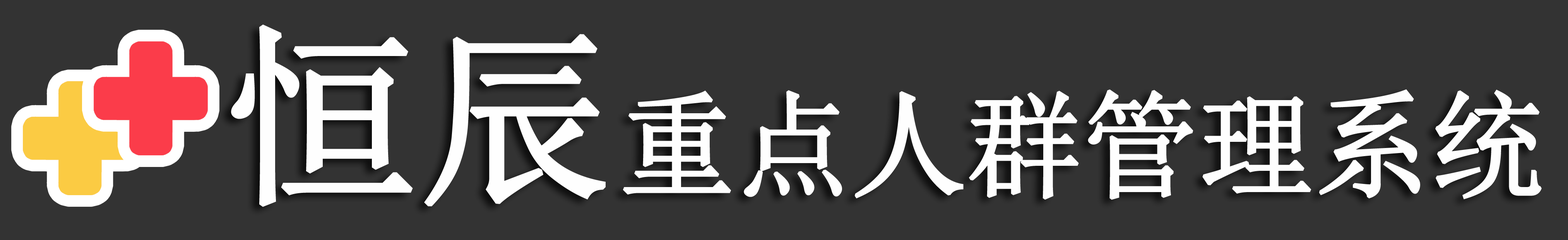
<style>
.page{position:relative;width:1568px;height:240px;background:#333333}
.page>*{position:absolute;margin:0}
.t1{font:193.5px "SimSun";letter-spacing:-0.03em;color:#fefefe;font-weight:bold}
.t2{font:116.1px "SimSun";letter-spacing:-0.03em;color:#fefefe;font-weight:bold}
</style>
<div class="page">
<p class="t1" style="left:231px;top:24px;width:375px;height:183px">恒辰</p>
<p class="t2" style="left:623px;top:89px;width:919px;height:111px">重点人群管理系统</p>
</div>
